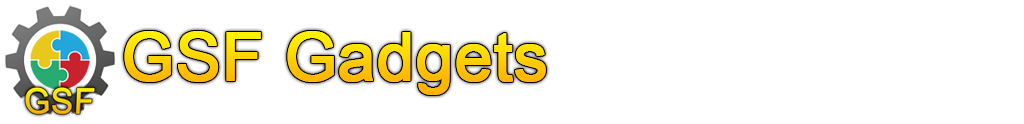
<style>
.page{position:relative;width:1024px;height:124px;background:#ffffff}
.page>*{position:absolute;margin:0}
.t1{font:66.7px "ArialMT";font-weight:bold}
</style>
<div class="page">
<p class="t1" style="left:124px;top:31px;width:422px;height:64px">GSF Gadgets</p>
</div>
